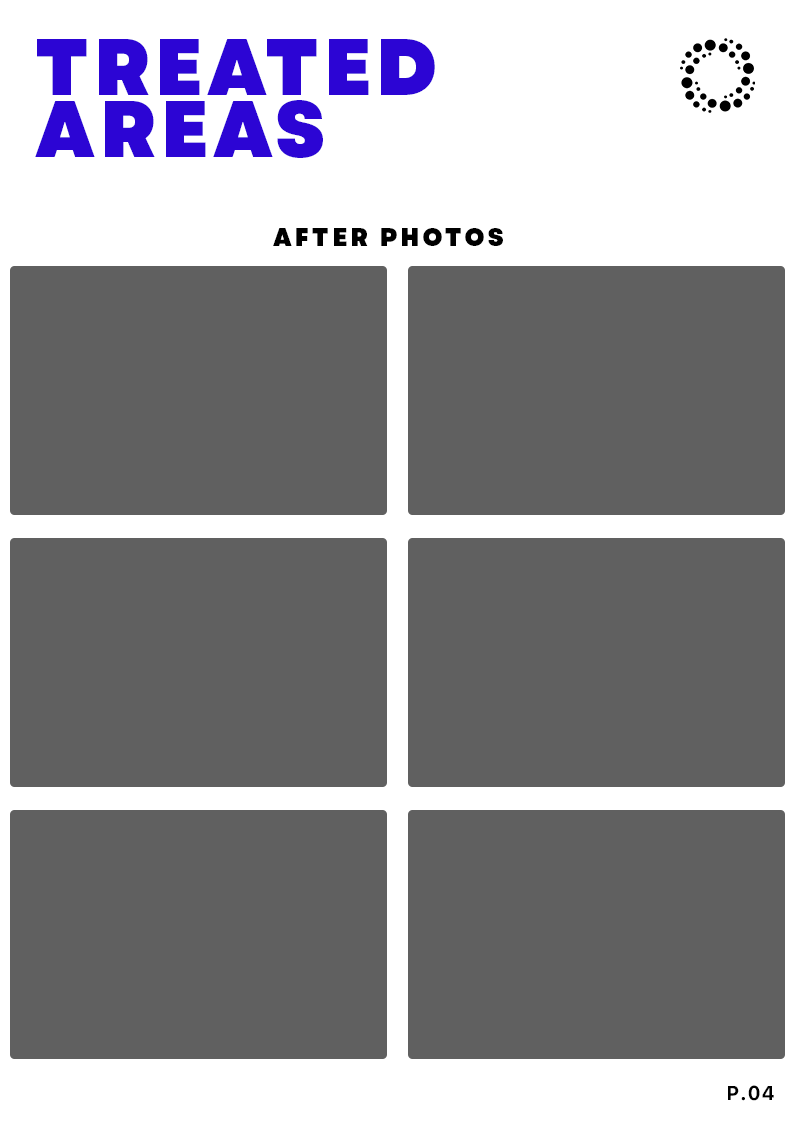
<style>
.page{position:relative;width:793px;height:1123px;background:#606060}
.page>*{position:absolute;margin:0}
.t1{font:80px/62px "Garet-Heavy";letter-spacing:0.06em;color:#2c05d4;text-transform:uppercase;scale:0.96 1}
.t2{font:25px "Garet-Heavy";letter-spacing:0.14em;color:#000000;text-transform:uppercase;scale:0.96 1}
.t3{font:20px "Galvji-Bold";letter-spacing:0.04em;color:#000000;scale:0.96 1}
</style>
<div class="page">
<p class="t1" style="left:35px;top:39px;width:400px;height:119px">treated<br>areas</p>
<p class="t2" style="left:273px;top:228px;width:230px;height:18px">AFTER photos</p>
<p class="t3" style="left:728px;top:1085px;width:46px;height:16px">P.04</p>
</div>
